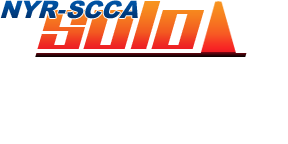
<style>
.page{position:relative;width:288px;height:144px;background:#ffffff}
.page>*{position:absolute;margin:0}
.t1{font:24.2px "Arial-Black";color:#00458e;font-style:italic}
.t2{font:56.4px "Kitchenpolice";scale:1.19 1}
</style>
<div class="page">
<p class="t1" style="left:0px;top:0px;width:138px;height:19px">NYR-SCCA</p>
<p class="t2" style="left:37px;top:1px;width:167px;height:48px">Solo</p>
</div>
